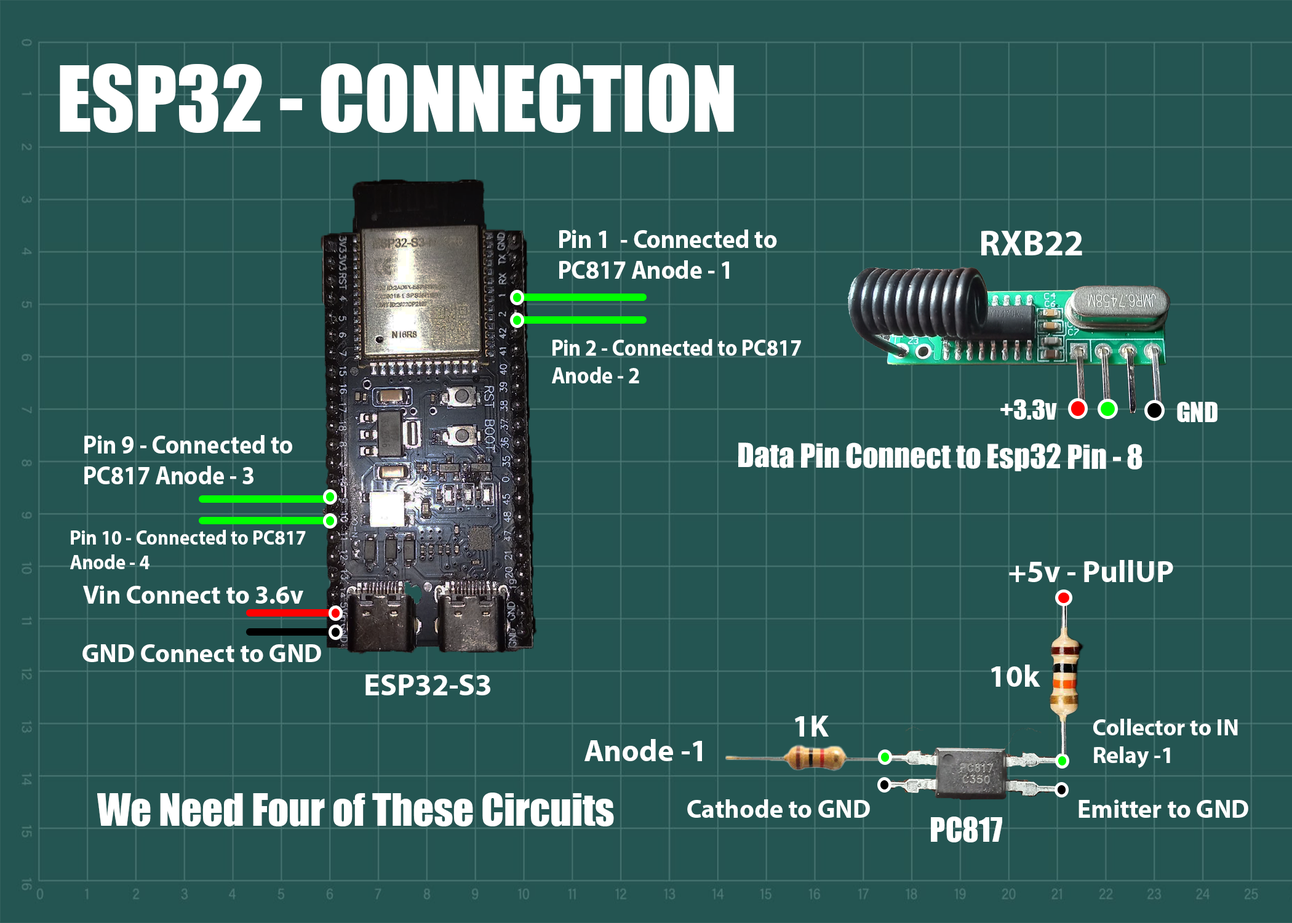
<style>
.page{position:relative;width:1292px;height:923px;background:#245552}
.page>*{position:absolute;margin:0}
.t1{font:84px "Impact";color:#ffffff}
.t2{font:25.6px "MyriadPro-Bold";color:#ffffff;scale:0.95 1}
.t3{font:35.9px "MyriadPro-Bold";color:#ffffff}
.t4{font:23.1px "MyriadPro-Bold";color:#ffffff;scale:0.91 1}
.t5{font:25.6px "Impact";color:#ffffff}
.t6{font:25.6px "MyriadPro-Bold";color:#ffffff;scale:0.92 1}
.t7{font:30.8px "Impact";color:#ffffff}
.t8{font:20.5px "MyriadPro-Bold";color:#ffffff;scale:0.92 1}
.t9{font:30.8px "MyriadPro-Bold";color:#ffffff}
.t10{font:25.6px "MyriadPro-Bold";color:#ffffff}
.t11{font:23.1px "MyriadPro-Bold";color:#ffffff}
.t12{font:41px "Impact";color:#ffffff}
</style>
<div class="page">
<p class="t1" style="left:60px;top:63px;width:674px;height:70px">ESP32 - CONNECTION</p>
<p class="t2" style="left:559px;top:229px;width:218px;height:50px">Pin 1  - Connected to PC817 Anode - 1</p>
<p class="t3" style="left:981px;top:231px;width:101px;height:24px">RXB22</p>
<p class="t4" style="left:552px;top:339px;width:249px;height:44px">Pin 2 - Connected to PC817 Anode - 2<br> - Connected to PC817 Anode</p>
<p class="t5" style="left:1000px;top:399px;width:57px;height:21px">+3.3v</p>
<p class="t5" style="left:1177px;top:402px;width:41px;height:20px">GND</p>
<p class="t6" style="left:84px;top:435px;width:208px;height:49px">Pin 9 - Connected to PC817 Anode - 3</p>
<p class="t7" style="left:738px;top:442px;width:405px;height:29px">Data Pin Connect to Esp32 Pin - 8</p>
<p class="t8" style="left:70px;top:530px;width:236px;height:39px">Pin 10 - Connected to PC817 Anode - 4</p>
<p class="t9" style="left:1009px;top:560px;width:164px;height:22px">+5v - PullUP</p>
<p class="t10" style="left:83px;top:585px;width:220px;height:19px">Vin Connect to 3.6v</p>
<p class="t10" style="left:82px;top:644px;width:239px;height:18px">GND Connect to GND</p>
<p class="t9" style="left:991px;top:664px;width:49px;height:23px">10k</p>
<p class="t9" style="left:365px;top:674px;width:125px;height:21px">ESP32-S3</p>
<p class="t9" style="left:795px;top:716px;width:34px;height:20px">1K</p>
<p class="t11" style="left:1093px;top:719px;width:145px;height:49px">Collector to IN Relay -1</p>
<p class="t9" style="left:585px;top:739px;width:117px;height:22px">Anode -1</p>
<p class="t12" style="left:97px;top:792px;width:517px;height:34px">We Need Four of These Circuits</p>
<p class="t10" style="left:687px;top:799px;width:183px;height:19px">Cathode to GND</p>
<p class="t10" style="left:1079px;top:799px;width:169px;height:19px">Emitter to GND</p>
<p class="t7" style="left:931px;top:816px;width:71px;height:26px">PC817</p>
</div>
